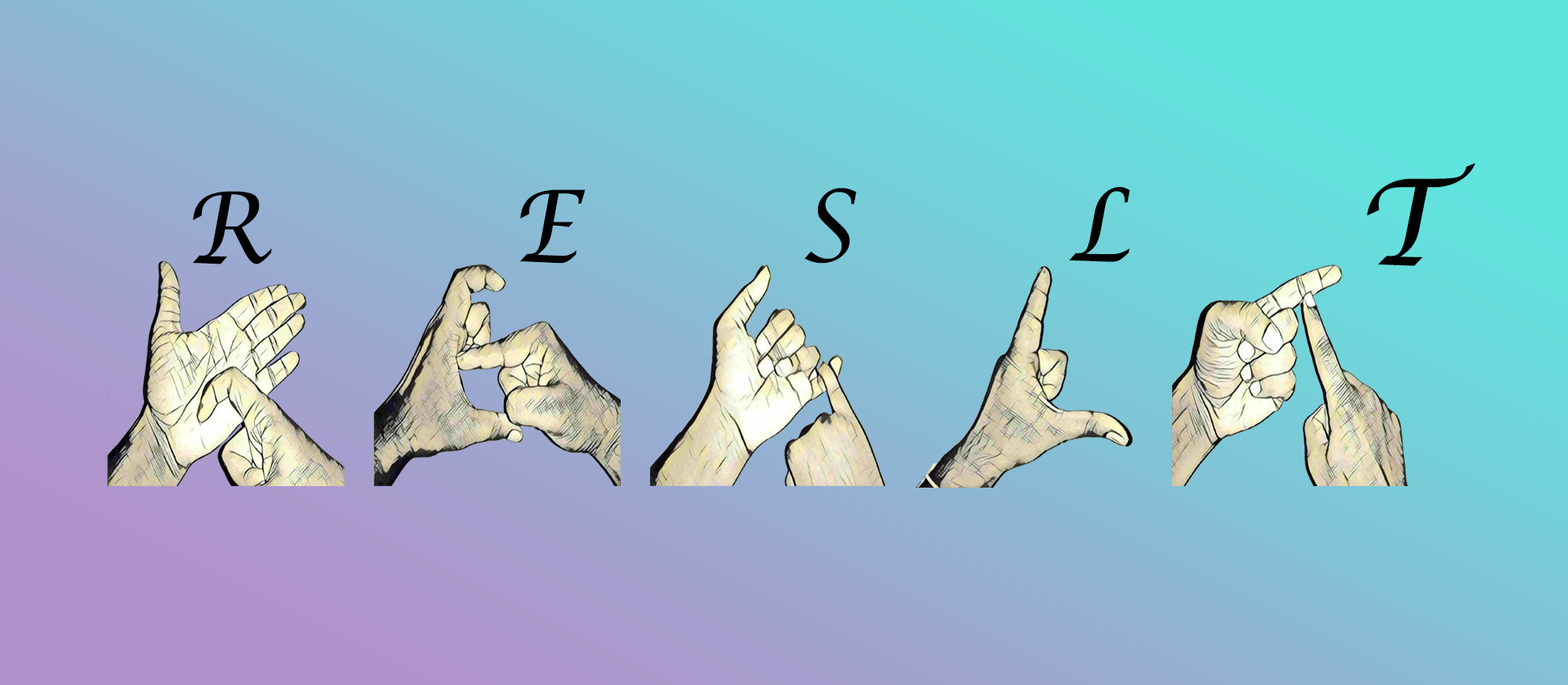
<style>
.page{position:relative;width:1568px;height:685px}
.page>*{position:absolute;margin:0}
.t1{font:118.3px "LucidaCalligraphy-Italic";color:#010101}
.t2{font:98.8px "LucidaCalligraphy-Italic";color:#010101;scale:0.92 1}
</style>
<div class="page">
<p class="t1" style="left:1367px;top:162px;width:109px;height:104px">T</p>
<p class="t2" style="left:192px;top:191px;width:80px;height:73px">R</p>
<p class="t2" style="left:520px;top:189px;width:65px;height:74px">E</p>
<p class="t2" style="left:805px;top:188px;width:52px;height:75px">S</p>
<p class="t2" style="left:1070px;top:187px;width:60px;height:75px">L</p>
</div>
